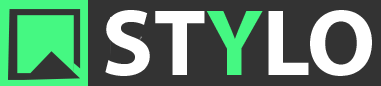
<style>
.page{position:relative;width:381px;height:86px;background:#333333}
.page>*{position:absolute;margin:0}
.t1{font:95.1px "MyriadPro-Bold";color:#ffffff}
.t2{font:95.1px "MyriadPro-Bold";color:#45f882}
</style>
<div class="page">
<p class="t1" style="left:105px;top:10px;width:267px;height:66px">ST<span class="t2">Y</span>LO</p>
</div>
